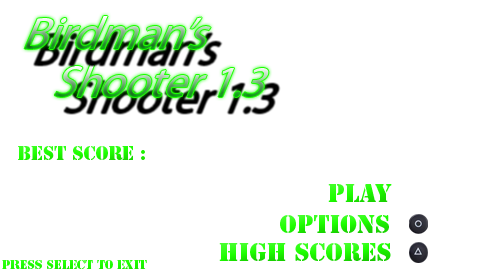
<style>
.page{position:relative;width:480px;height:272px;background:#ffffff}
.page>*{position:absolute;margin:0}
.t1{font:48px "MyriadPro-Regular";scale:0.93 1}
.t2{font:18px "StencilStd"}
.t3{font:24px "StencilStd"}
.t4{font:12px "StencilStd";color:#1efe00}
</style>
<div class="page">
<p class="t1" style="left:54px;top:65px;width:215px;height:32px">Shooter 1.3</p>
<p class="t2" style="left:18px;top:146px;width:127px;height:14px">Best Score :</p>
<p class="t3" style="left:328px;top:184px;width:64px;height:18px">Play</p>
<p class="t3" style="left:280px;top:215px;width:109px;height:18px">options</p>
<p class="t3" style="left:219px;top:243px;width:172px;height:18px">High Scores</p>
<p class="t4" style="left:2px;top:260px;width:145px;height:9px">Press SELECT To Exit</p>
</div>
